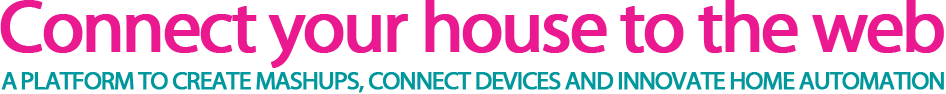
<style>
.page{position:relative;width:946px;height:94px;background:#ffffff}
.page>*{position:absolute;margin:0}
.t1{font:74.1px "MyriadWebPro";letter-spacing:-0.055em;color:#ea198f;font-weight:bold}
.t2{font:24.7px "MyriadWebPro";letter-spacing:-0.055em;color:#00979d;font-weight:bold}
</style>
<div class="page">
<p class="t1" style="left:0px;top:0px;width:944px;height:68px">Connect your house to the web</p>
<p class="t2" style="left:1px;top:72px;width:943px;height:21px">A PLATFORM TO CREATE MASHUPS, CONNECT DEVICES AND INNOVATE HOME AUTOMATION</p>
</div>
